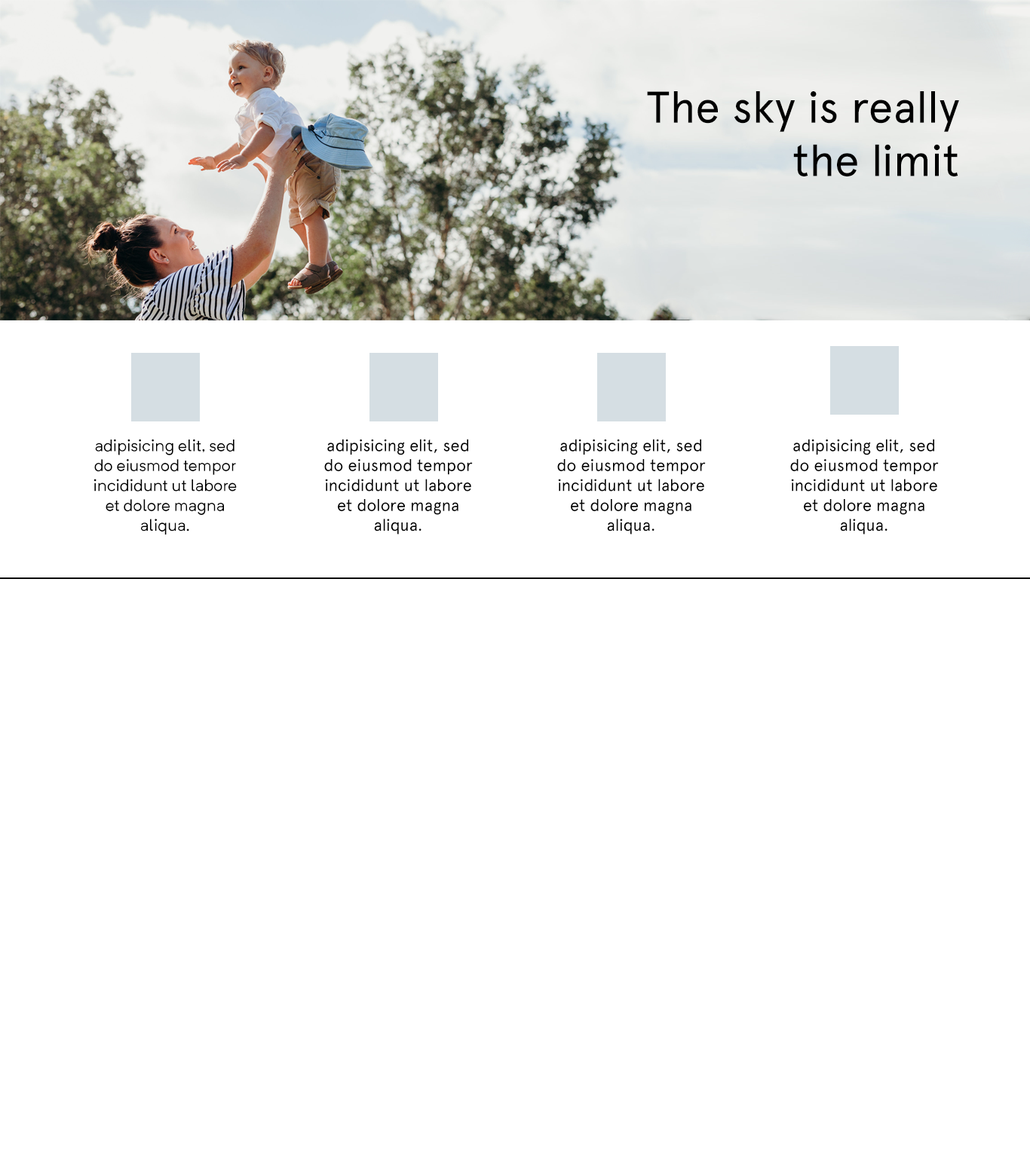
<style>
.page{position:relative;width:1030px;height:1158px;background:#ffffff}
.page>*{position:absolute;margin:0}
.t1{font:44.4px "Apercu-Regular";color:#000000}
.t2{font:16.6px "NeutrifPro-Regular";color:#000000}
.t3{font:16.6px "Apercu-Regular";color:#000000}
</style>
<div class="page">
<p class="t1" style="left:647px;top:91px;width:312px;height:85px;text-align:right">The sky is really<br>the limit</p>
<p class="t2" style="left:93px;top:439px;width:144px;height:95px;text-align:center">adipisicing elit, sed do eiusmod tempor incididunt ut labore et dolore magna aliqua.</p>
<p class="t3" style="left:324px;top:439px;width:149px;height:95px;text-align:center">adipisicing elit, sed do eiusmod tempor incididunt ut labore et dolore magna aliqua.</p>
<p class="t3" style="left:557px;top:439px;width:149px;height:95px;text-align:center">adipisicing elit, sed do eiusmod tempor incididunt ut labore et dolore magna aliqua.</p>
<p class="t3" style="left:790px;top:439px;width:149px;height:95px;text-align:center">adipisicing elit, sed do eiusmod tempor incididunt ut labore et dolore magna aliqua.</p>
</div>
